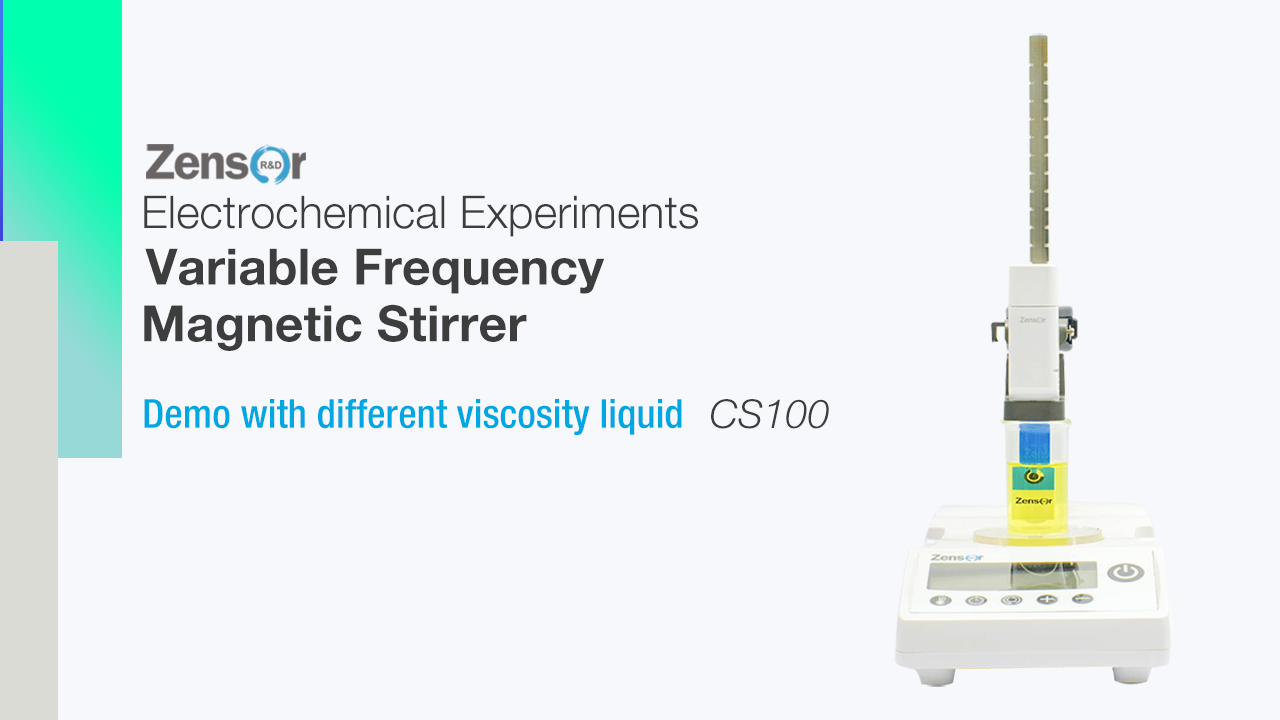
<style>
.page{position:relative;width:1280px;height:720px;background:#f7f8fc}
.page>*{position:absolute;margin:0}
.t1{font:45px "HelveticaNeueLTPro-Lt";color:#3d3d3d}
.t2{font:50px "HelveticaNeueLTPro-Bd";color:#3d3d3d}
.t3{font:40px "HelveticaNeueLTPro-MdCn";color:#00a7e1}
.t4{font:40px "HelveticaNeueLTPro-LtIt";color:#3d3d3d}
</style>
<div class="page">
<p class="t1" style="left:144px;top:195px;width:554px;height:42px">Electrochemical Experiments</p>
<p class="t2" style="left:145px;top:248px;width:460px;height:46px">Variable Frequency</p>
<p class="t2" style="left:144px;top:304px;width:383px;height:47px">Magnetic Stirrer</p>
<p class="t3" style="left:144px;top:399px;width:538px;height:36px">Demo with different viscosity liquid</p>
<p class="t4" style="left:711px;top:399px;width:118px;height:30px">CS100</p>
</div>
